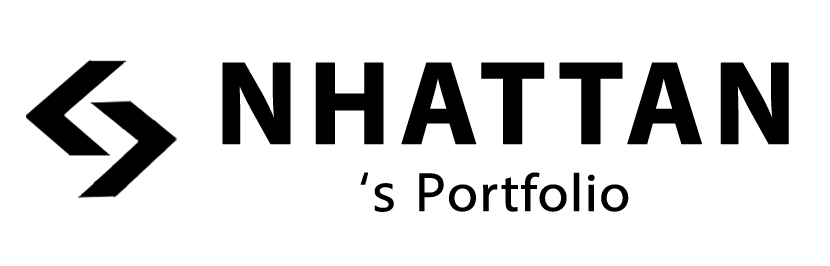
<style>
.page{position:relative;width:830px;height:266px;background:#ffffff}
.page>*{position:absolute;margin:0}
.t1{font:120px "MyriadPro-Bold";letter-spacing:0.075em;color:#000000;font-weight:bold}
.t2{font:53.3px "MyriadPro-Regular";color:#000000;font-weight:bold;scale:1.05 1}
.t3{font:53.3px "MicrosoftNewTaiLue";color:#000000;font-weight:bold;scale:1.05 1}
</style>
<div class="page">
<p class="t1" style="left:222px;top:62px;width:567px;height:83px">NHATTAN</p>
<p class="t2" style="left:360px;top:172px;width:269px;height:40px"><span class="t3">‘s P</span>ortfolio</p>
</div>
